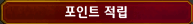
<style>
.page{position:relative;width:193px;height:24px}
.page>*{position:absolute;margin:0}
.t1{font:14px "2002L";color:#ffffff}
</style>
<div class="page">
<p class="t1" style="left:65px;top:6px;width:62px;height:13px">포인트 적립</p>
</div>
